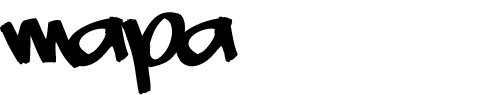
<style>
.page{position:relative;width:500px;height:95px;background:#ffffff}
.page>*{position:absolute;margin:0}
.t1{font:80px "aaaiight!";letter-spacing:0.02em;color:#000000}
</style>
<div class="page">
<p class="t1" style="left:0px;top:12px;width:238px;height:83px">mapa</p>
</div>
